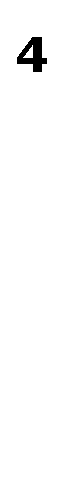
<style>
.page{position:relative;width:64px;height:500px;background:#ffffff}
.page>*{position:absolute;margin:0}
.t1{font:48px "Verdana-Bold";color:#000000}
</style>
<div class="page">
<p class="t1" style="left:17px;top:37px;width:30px;height:35px">4</p>
</div>
